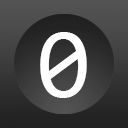
<style>
.page{position:relative;width:128px;height:128px}
.page>*{position:absolute;margin:0}
.t1{font:100px "Consolas";color:#ffffff}
</style>
<div class="page">
<p class="t1" style="left:40px;top:32px;width:47px;height:66px">0</p>
</div>
